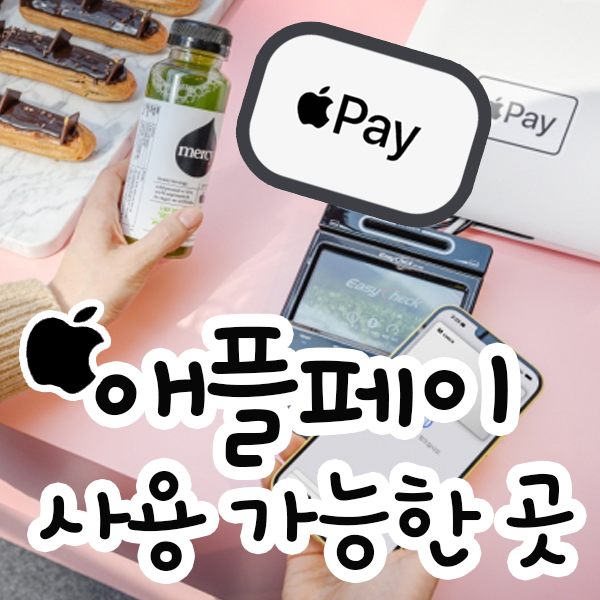
<style>
.page{position:relative;width:600px;height:600px}
.page>*{position:absolute;margin:0}
.t1{font:114.2px/144px "Cafe24Syongsyong";letter-spacing:-0.05em;color:#070707}
.t2{font:144px/144px "Cafe24Syongsyong";letter-spacing:-0.05em;color:#070707}
</style>
<div class="page">
<p class="t1" style="left:40px;top:326px;width:534px;height:245px;text-align:center"><span class="t2">애플페이<br></span>사용 가능한 곳</p>
</div>
